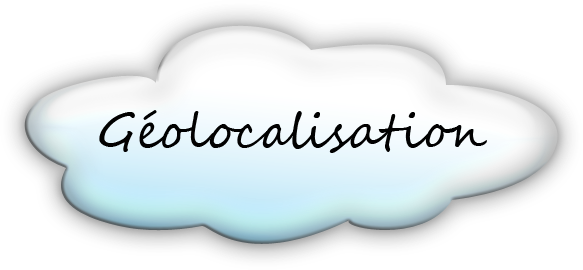
<style>
.page{position:relative;width:583px;height:270px;background:#ffffff}
.page>*{position:absolute;margin:0}
.t1{font:48px "SegoeScript";color:#010101}
</style>
<div class="page">
<p class="t1" style="left:99px;top:110px;width:388px;height:43px">Géolocalisation</p>
</div>
